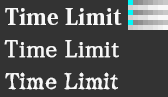
<style>
.page{position:relative;width:168px;height:97px;background:#333333}
.page>*{position:absolute;margin:0}
.t1{font:22px/32px "KozMinPro-Heavy";letter-spacing:0.022em;color:#f8f8f8}
.t2{font:22px/32px "AdobeFangsongStd-Regular";letter-spacing:0.028em;color:#f8f8f8;font-weight:bold}
.t3{font:22px/32px "ComicMysteryStd-DB";letter-spacing:-0.006em;color:#f8f8f8}
</style>
<div class="page">
<p class="t1" style="left:4px;top:8px;width:118px;height:82px">Time Limit<br><span class="t2">Time Limit<br></span><span class="t3">Time Limit</span></p>
</div>
